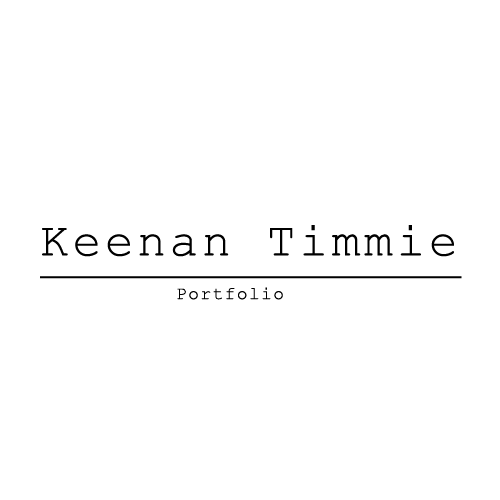
<style>
.page{position:relative;width:500px;height:500px;background:#ffffff}
.page>*{position:absolute;margin:0}
.t1{font:48px "CourierNewPSMT";letter-spacing:0.075em;color:#000000;text-decoration:underline}
.t2{font:18px "CourierNewPSMT";letter-spacing:0.075em;color:#000000}
</style>
<div class="page">
<p class="t1" style="left:40px;top:225px;width:422px;height:54px">Keenan Timmie</p>
<p class="t2" style="left:177px;top:287px;width:106px;height:13px">Portfolio</p>
</div>
